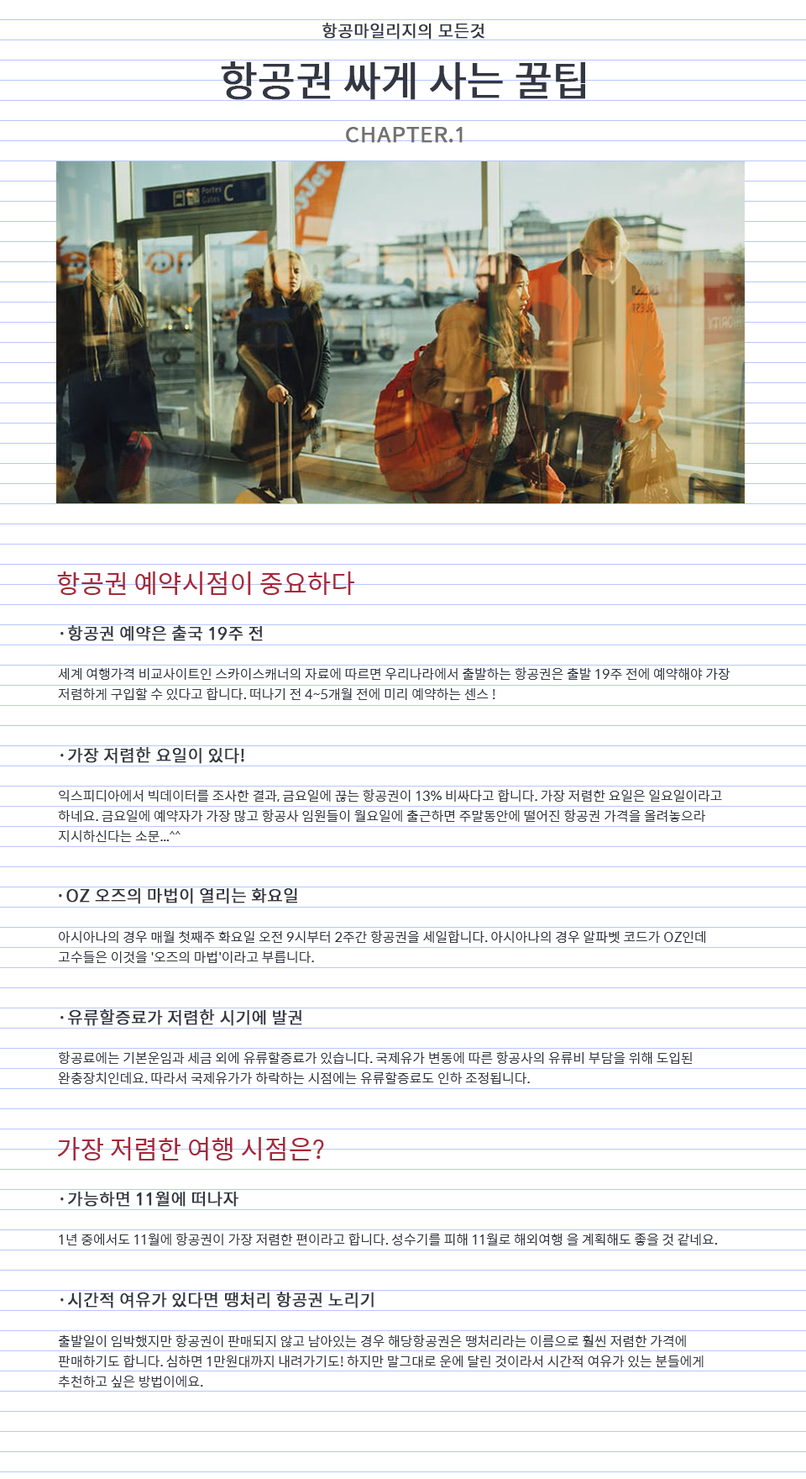
<style>
.page{position:relative;width:806px;height:1479px;background:#ffffff}
.page>*{position:absolute;margin:0}
.t1{font:16.8px "SpoqaHanSans-Regular";letter-spacing:-0.02em;color:#333741;font-weight:bold}
.t2{font:41px "SpoqaHanSans-Regular";letter-spacing:-0.02em;color:#333741;font-weight:bold}
.t3{font:21px "SpoqaHanSans-Regular";letter-spacing:-0.02em;color:#717171;font-weight:bold}
.t4{font:26.3px "SpoqaHanSans-Regular";letter-spacing:-0.02em;color:#a6293b}
.t5{font:13.4px "SpoqaHanSans-Regular";letter-spacing:-0.02em;color:#333741}
</style>
<div class="page">
<p class="t1" style="left:323px;top:23px;width:162px;height:16px">항공마일리지의 모든것</p>
<p class="t2" style="left:221px;top:61px;width:365px;height:39px">항공권 싸게 사는 꿀팁</p>
<p class="t3" style="left:346px;top:127px;width:117px;height:16px">CHAPTER.1</p>
<p class="t4" style="left:57px;top:571px;width:298px;height:24px">항공권 예약시점이 중요하다</p>
<p class="t1" style="left:60px;top:625px;width:203px;height:16px">·항공권 예약은 출국 19주 전</p>
<p class="t5" style="left:58px;top:667px;width:673px;height:33px">세계 여행가격 비교사이트인 스카이스캐너의 자료에 따르면 우리나라에서 출발하는 항공권은 출발 19주 전에 예약해야 가장 저렴하게 구입할 수 있다고 합니다. 떠나기 전 4~5개월 전에 미리 예약하는 센스 !</p>
<p class="t1" style="left:60px;top:747px;width:184px;height:17px">·가장 저렴한 요일이 있다!</p>
<p class="t5" style="left:58px;top:789px;width:664px;height:53px">익스피디아에서 빅데이터를 조사한 결과, 금요일에 끊는 항공권이 13% 비싸다고 합니다. 가장 저렴한 요일은 일요일이라고 하네요. 금요일에 예약자가 가장 많고 항공사 임원들이 월요일에 출근하면 주말동안에 떨어진 항공권 가격을 올려놓으라 지시하신다는 소문...^^</p>
<p class="t1" style="left:59px;top:888px;width:238px;height:16px">·OZ 오즈의 마법이 열리는 화요일</p>
<p class="t5" style="left:58px;top:930px;width:648px;height:33px">아시아나의 경우 매월 첫째주 화요일 오전 9시부터 2주간 항공권을 세일합니다. 아시아나의 경우 알파벳 코드가 OZ인데 고수들은 이것을 '오즈의 마법'이라고 부릅니다.</p>
<p class="t1" style="left:60px;top:1009px;width:242px;height:17px">·유류할증료가 저렴한 시기에 발권</p>
<p class="t5" style="left:58px;top:1051px;width:634px;height:33px">항공료에는 기본운임과 세금 외에 유류할증료가 있습니다. 국제유가 변동에 따른 항공사의 유류비 부담을 위해 도입된 완충장치인데요. 따라서 국제유가가 하락하는 시점에는 유류할증료도 인하 조정됩니다.</p>
<p class="t4" style="left:57px;top:1137px;width:267px;height:23px">가장 저렴한 여행 시점은?</p>
<p class="t1" style="left:60px;top:1191px;width:179px;height:15px">·가능하면 11월에 떠나자</p>
<p class="t5" style="left:59px;top:1232px;width:658px;height:13px">1년 중에서도 11월에 항공권이 가장 저렴한 편이라고 합니다. 성수기를 피해 11월로 해외여행 을 계획해도 좋을 것 같네요.</p>
<p class="t1" style="left:60px;top:1291px;width:314px;height:17px">·시간적 여유가 있다면 땡처리 항공권 노리기</p>
<p class="t5" style="left:58px;top:1334px;width:646px;height:53px">출발일이 임박했지만 항공권이 판매되지 않고 남아있는 경우 해당항공권은 땡처리라는 이름으로 훨씬 저렴한 가격에 판매하기도 합니다. 심하면 1만원대까지 내려가기도! 하지만 말그대로 운에 달린 것이라서 시간적 여유가 있는 분들에게 추천하고 싶은 방법이에요.</p>
</div>
